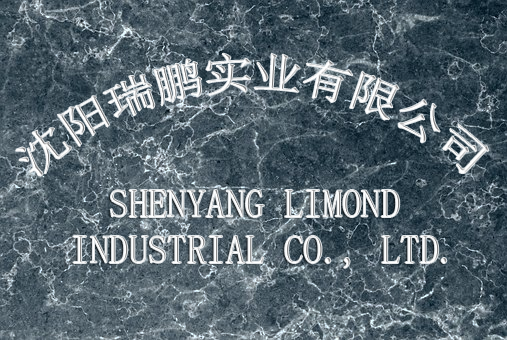
<style>
.page{position:relative;width:507px;height:340px}
.page>*{position:absolute;margin:0}
.t1{font:42.9px "SimSun"}
.t2{font:38.8px "SimSun"}
</style>
<div class="page">
<p class="t1" style="left:16px;top:53px;width:473px;height:123px">沈阳瑞鹏实业有限公司</p>
<p class="t2" style="left:73px;top:190px;width:374px;height:78px;text-align:center">SHENYANG LIMOND <br>INDUSTRIAL CO., LTD.</p>
</div>
